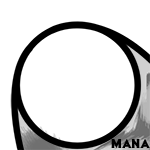
<style>
.page{position:relative;width:150px;height:150px;background:#ffffff}
.page>*{position:absolute;margin:0}
.t1{font:10.8px "EvilDead";letter-spacing:-0.001em;color:#000000;scale:1.11 1}
</style>
<div class="page">
<p class="t1" style="left:111px;top:139px;width:39px;height:9px">Mana</p>
</div>
